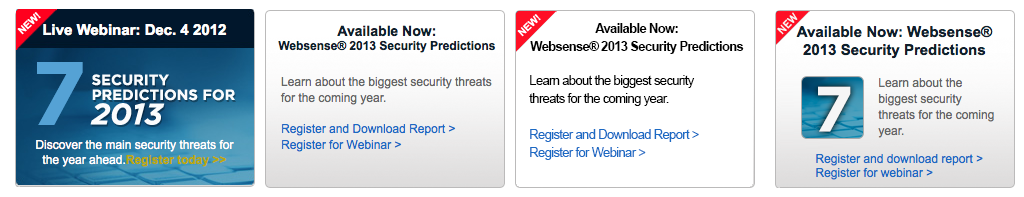
<style>
.page{position:relative;width:1024px;height:197px;background:#ffffff}
.page>*{position:absolute;margin:0}
.t1{font:11px "FranklinGothic-Book";letter-spacing:0.03em;color:#f6f6f6;font-weight:bold}
.t2{font:13px/18px "Arial-BoldMT";letter-spacing:-0.05em;color:#000000}
.t3{font:13px/18px "ArialMT";letter-spacing:-0.05em;color:#000000}
.t4{font:13px/18px "ArialMT";letter-spacing:-0.05em;color:#1b6ac4}
.t5{font:64px "Gotham-Bold";color:#f6f6f6;text-transform:uppercase}
</style>
<div class="page">
<p class="t1" style="left:777px;top:12px;width:21px;height:23px;rotate:-46deg">NEW</p>
<p class="t2" style="left:530px;top:23px;width:214px;height:31px;text-align:center">Available Now:<br>Websense® 2013 Security Predictions</p>
<p class="t3" style="left:529px;top:75px;width:170px;height:85px">Learn about the biggest security <br>threats for the coming year.<br><br><span class="t4">Register and Download Report &gt; <br>Register for Webinar &gt;</span></p>
<p class="t5" style="left:818px;top:86px;width:33px;height:46px">7</p>
</div>
